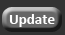
<style>
.page{position:relative;width:65px;height:35px;background:#333333}
.page>*{position:absolute;margin:0}
.t1{font:15px "Calibri-Bold";color:#ffffff}
</style>
<div class="page">
<p class="t1" style="left:9px;top:14px;width:46px;height:13px">Update</p>
</div>
